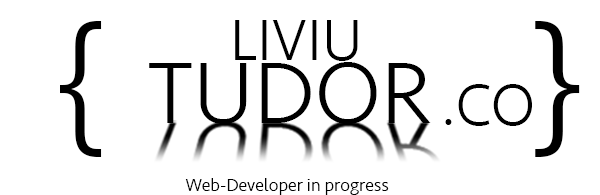
<style>
.page{position:relative;width:600px;height:195px;background:#ffffff}
.page>*{position:absolute;margin:0}
.t1{font:150px "Seravek-Light";color:#000000;scale:0.94 1}
.t2{font:60px "Seravek-Light";color:#000000}
.t3{font:150px "Seravek-Light";color:#000000}
.t4{font:90px "Seravek-Light";color:#000000}
.t5{font:18px "Seravek-Light";color:#000000}
</style>
<div class="page">
<p class="t1" style="left:60px;top:21px;width:42px;height:136px;rotate:180deg">}</p>
<p class="t2" style="left:235px;top:20px;width:123px;height:41px">LIVIU</p>
<p class="t3" style="left:535px;top:21px;width:45px;height:136px">}</p>
<p class="t4" style="left:149px;top:62px;width:282px;height:62px">TUDOR</p>
<p class="t2" style="left:445px;top:84px;width:87px;height:42px">.CO</p>
<p class="t5" style="left:185px;top:178px;width:204px;height:17px">Web-Developer in progress</p>
</div>
